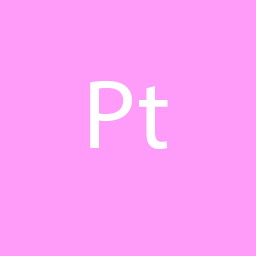
<style>
.page{position:relative;width:256px;height:256px;background:#ff9bf9}
.page>*{position:absolute;margin:0}
.t1{font:100px "MyriadPro-Regular";color:#ffffff}
</style>
<div class="page">
<p class="t1" style="left:90px;top:81px;width:78px;height:68px">Pt</p>
</div>
